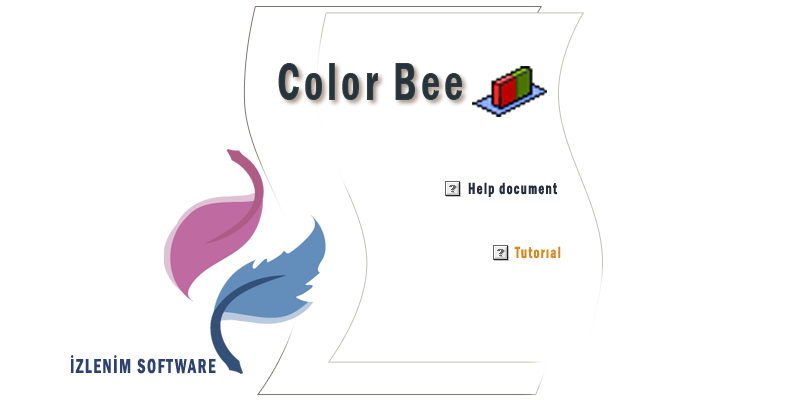
<style>
.page{position:relative;width:800px;height:400px;background:#ffffff}
.page>*{position:absolute;margin:0}
.t1{font:54.6px "FranklinGotT-DemCon";letter-spacing:0.1em;color:#24343d;scale:0.76 1}
.t2{font:16.8px "FranklinGotT-DemCon";letter-spacing:0.1em;color:#252b3d;scale:0.76 1}
.t3{font:16.8px "FranklinGotT-DemCon";letter-spacing:0.1em;color:#d48826;scale:0.76 1}
.t4{font:21px "FranklinGotT-DemCon";letter-spacing:0.1em;color:#2d4271;scale:0.76 1}
</style>
<div class="page">
<p class="t1" style="left:278px;top:63px;width:184px;height:37px">Color Bee</p>
<p class="t2" style="left:468px;top:182px;width:89px;height:15px">Help document</p>
<p class="t3" style="left:514px;top:246px;width:47px;height:13px">Tutorıal</p>
<p class="t4" style="left:71px;top:355px;width:145px;height:19px">İZLENİM SOFTWARE</p>
</div>
